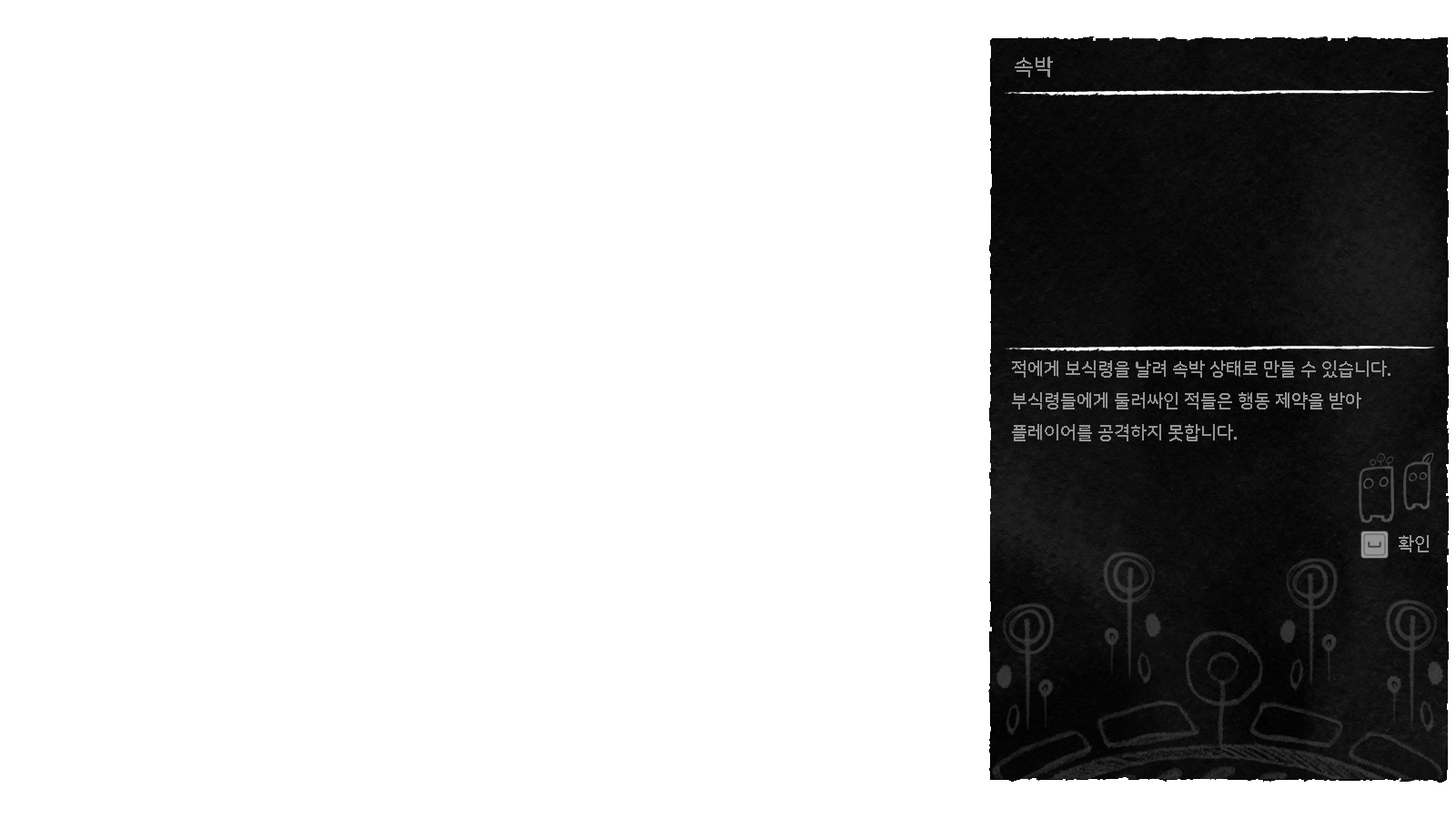
<style>
.page{position:relative;width:1456px;height:819px;background:#ffffff}
.page>*{position:absolute;margin:0}
.t1{font:21.8px "NanumSquareRoundB";color:#939393}
.t2{font:18.2px "NanumSquareRoundB";color:#939393}
</style>
<div class="page">
<p class="t1" style="left:1015px;top:56px;width:38px;height:21px">속박</p>
<p class="t2" style="left:1012px;top:360px;width:378px;height:81px">적에게 보식령을 날려 속박 상태로 만들 수 있습니다.<br>부식령들에게 둘러싸인 적들은 행동 제약을 받아<br>플레이어를 공격하지 못합니다.</p>
<p class="t2" style="left:1399px;top:535px;width:30px;height:17px">확인</p>
</div>
